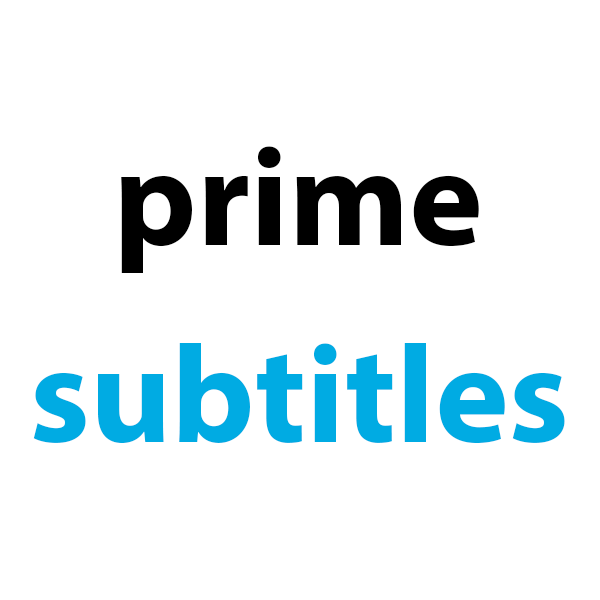
<style>
.page{position:relative;width:600px;height:600px;background:#ffffff}
.page>*{position:absolute;margin:0}
.t1{font:140px "MyriadPro-Bold";color:#000000}
.t2{font:140px "MyriadPro-Bold";color:#00abe3}
</style>
<div class="page">
<p class="t1" style="left:121px;top:146px;width:358px;height:127px">prime</p>
<p class="t2" style="left:33px;top:343px;width:532px;height:100px">subtitles</p>
</div>
